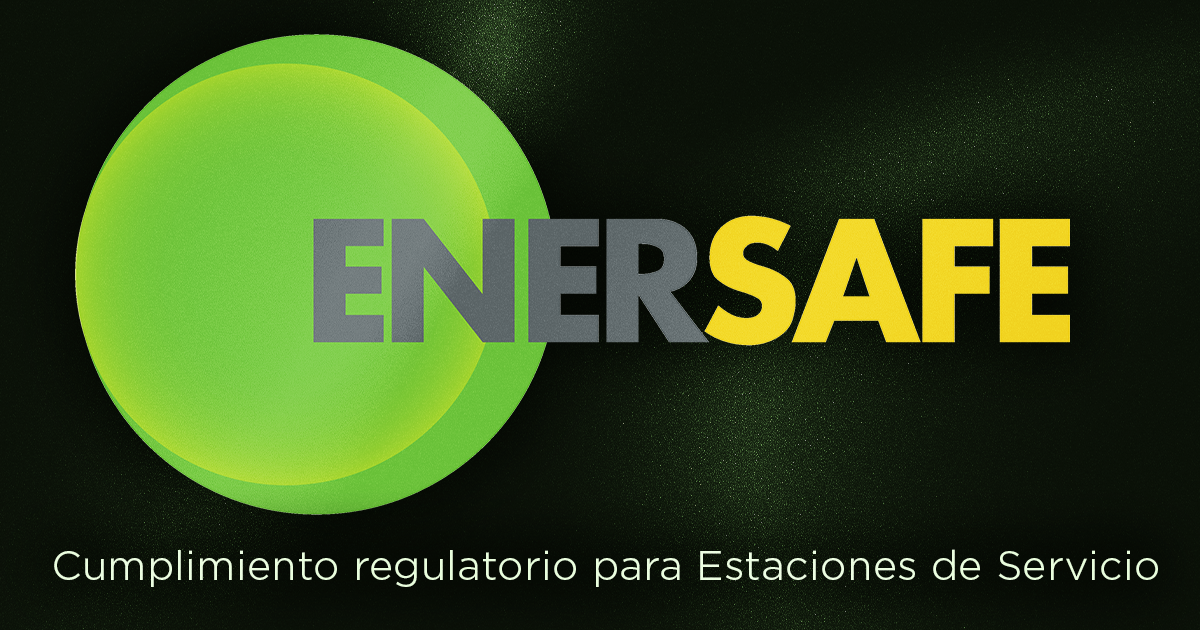
<style>
.page{position:relative;width:1200px;height:630px}
.page>*{position:absolute;margin:0}
.t1{font:39.5px "GothamOffice-Regular";color:#edfee3}
</style>
<div class="page">
<p class="t1" style="left:54px;top:549px;width:1104px;height:38px">Cumplimiento regulatorio para Estaciones de Servicio</p>
</div>
